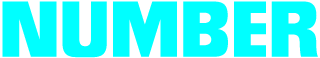
<style>
.page{position:relative;width:320px;height:58px;background:#00ffff}
.page>*{position:absolute;margin:0}
.t1{font:72px "NeographikMT";color:#00ffff}
</style>
<div class="page">
<p class="t1" style="left:2px;top:1px;width:316px;height:57px">NUMBER</p>
</div>
